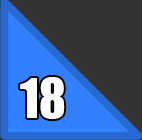
<style>
.page{position:relative;width:142px;height:140px;background:#333333}
.page>*{position:absolute;margin:0}
.t1{font:50px "Impact";color:#ffffff}
</style>
<div class="page">
<p class="t1" style="left:20px;top:77px;width:45px;height:42px">18</p>
</div>
